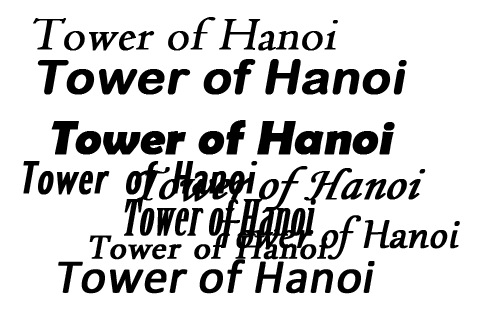
<style>
.page{position:relative;width:480px;height:320px;background:#ffffff}
.page>*{position:absolute;margin:0}
.t1{font:48px "Centaur";color:#000000;font-weight:bold;font-style:italic}
.t2{font:48px "ArialRoundedMTBold";color:#000000;font-weight:bold;font-style:italic}
.t3{font:48px "BerlinSansFBDemi-Bold";color:#000000;font-weight:bold;font-style:italic}
.t4{font:48px "GillSansMT-Condensed";color:#000000;font-weight:bold;font-style:italic}
.t5{font:48px "MonotypeCorsiva";color:#000000;font-weight:bold;font-style:italic}
.t6{font:48px "BirchStd";color:#000000;font-weight:bold;font-style:italic}
.t7{font:48px "Gabriola";color:#000000;font-weight:bold;font-style:italic}
.t8{font:48px "DaunPenh";color:#000000;font-weight:bold;font-style:italic}
.t9{font:48px "Calibri";color:#000000;font-weight:bold;font-style:italic}
</style>
<div class="page">
<p class="t1" style="left:33px;top:17px;width:305px;height:34px">Tower of Hanoi</p>
<p class="t2" style="left:37px;top:59px;width:370px;height:36px">Tower of Hanoi</p>
<p class="t3" style="left:51px;top:120px;width:344px;height:35px">Tower of Hanoi</p>
<p class="t4" style="left:23px;top:161px;width:235px;height:34px">Tower of Hanoi</p>
<p class="t5" style="left:134px;top:166px;width:292px;height:46px">Tower of Hanoi</p>
<p class="t6" style="left:124px;top:199px;width:192px;height:37px">Tower of Hanoi</p>
<p class="t7" style="left:216px;top:215px;width:244px;height:45px">Tower of Hanoi</p>
<p class="t8" style="left:89px;top:232px;width:239px;height:28px">Tower of Hanoi</p>
<p class="t9" style="left:58px;top:259px;width:317px;height:35px">Tower of Hanoi</p>
</div>
